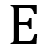
<style>
.page{position:relative;width:50px;height:50px;background:#ffffff}
.page>*{position:absolute;margin:0}
.t1{font:58.3px "CambriaMath";color:#000000}
</style>
<div class="page">
<p class="t1" style="left:10px;top:5px;width:28px;height:39px">E</p>
</div>
